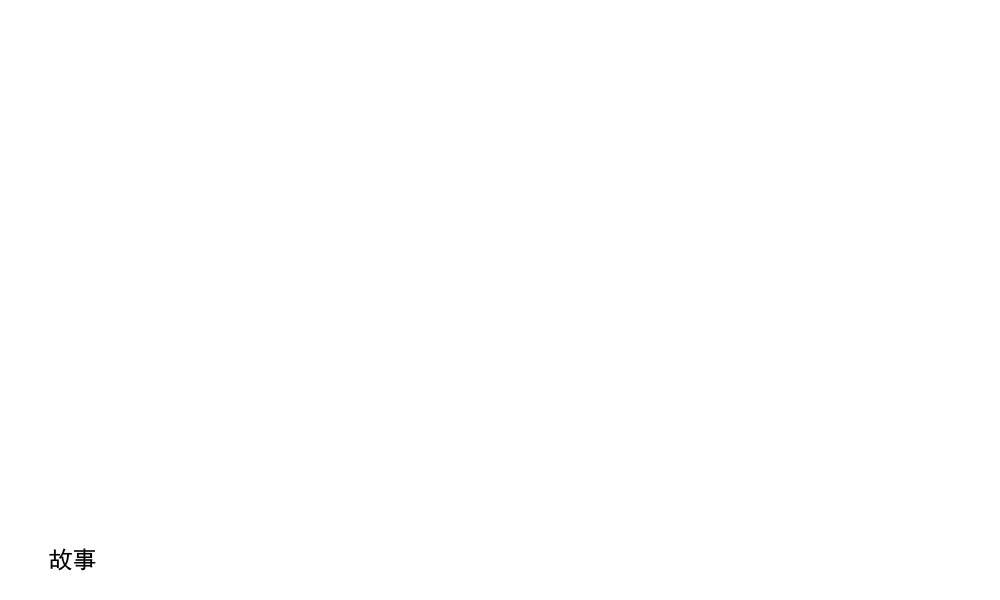
<style>
.page{position:relative;width:1000px;height:600px;background:#ffffff}
.page>*{position:absolute;margin:0}
.t1{font:24px "SimHei";color:#000000}
</style>
<div class="page">
<p class="t1" style="left:49px;top:548px;width:47px;height:23px">故事</p>
</div>
